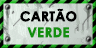
<style>
.page{position:relative;width:96px;height:48px}
.page>*{position:absolute;margin:0}
.t1{font:13.3px/16px "CenturyGothic-Bold";letter-spacing:0.005em;color:#000000;text-transform:uppercase;font-weight:bold}
.t2{font:13.3px/16px "CenturyGothic-Bold";letter-spacing:0.005em;color:#138f0e;text-transform:uppercase;font-weight:bold}
</style>
<div class="page">
<p class="t1" style="left:20px;top:8px;width:57px;height:30px;text-align:center">CARTÃO<br><span class="t2">VERDE</span></p>
</div>
